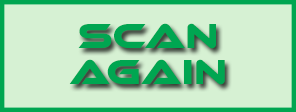
<style>
.page{position:relative;width:296px;height:112px;background:#d6f1d3}
.page>*{position:absolute;margin:0}
.t1{font:36px/36px "EthnocentricRg-Regular";color:#00a651}
</style>
<div class="page">
<p class="t1" style="left:69px;top:23px;width:156px;height:62px;text-align:center">scan Again</p>
</div>
